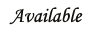
<style>
.page{position:relative;width:100px;height:42px;background:#ffffff}
.page>*{position:absolute;margin:0}
.t1{font:20.8px "MonotypeCorsiva";color:#13120f}
</style>
<div class="page">
<p class="t1" style="left:9px;top:7px;width:74px;height:18px">Available</p>
</div>
